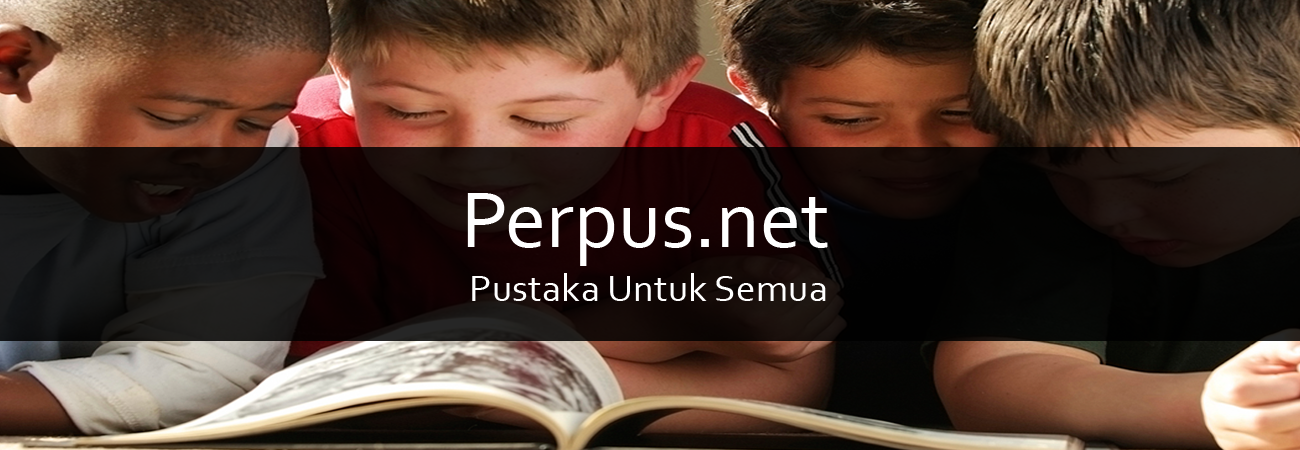
<style>
.page{position:relative;width:1300px;height:450px}
.page>*{position:absolute;margin:0}
.t1{font:82.8px "Corbel";color:#ffffff}
.t2{font:39.5px "Corbel";color:#ffffff}
</style>
<div class="page">
<p class="t1" style="left:467px;top:193px;width:361px;height:73px">Perpus.net</p>
<p class="t2" style="left:472px;top:273px;width:354px;height:28px">Pustaka Untuk Semua</p>
</div>
